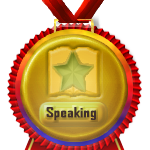
<style>
.page{position:relative;width:150px;height:150px;background:#ffffff}
.page>*{position:absolute;margin:0}
.t1{font:12.8px "AgencyFB-Bold";color:#3a2824;scale:1.3 1}
</style>
<div class="page">
<p class="t1" style="left:46px;top:107px;width:50px;height:14px">Speaking</p>
</div>
